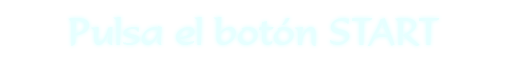
<style>
.page{position:relative;width:512px;height:64px;background:#ffffff}
.page>*{position:absolute;margin:0}
.t1{font:37.3px "Formal436BT-Regular";color:#e6ffff}
</style>
<div class="page">
<p class="t1" style="left:68px;top:17px;width:372px;height:29px">Pulsa el botón START</p>
</div>
